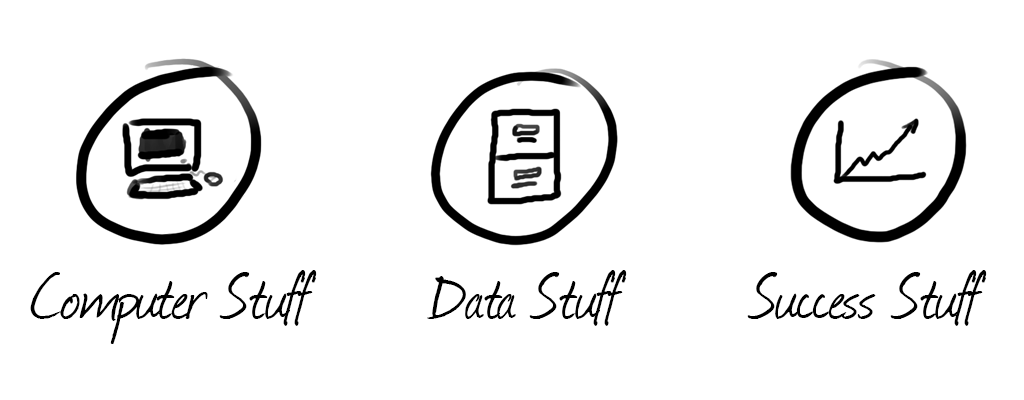
<style>
.page{position:relative;width:1024px;height:400px;background:#ffffff}
.page>*{position:absolute;margin:0}
.t1{font:75px "Journal";color:#000000}
</style>
<div class="page">
<p class="t1" style="left:30px;top:270px;width:287px;height:74px">Computer Stuff</p>
<p class="t1" style="left:427px;top:270px;width:200px;height:56px">Data Stuff</p>
<p class="t1" style="left:747px;top:270px;width:240px;height:56px">Success Stuff</p>
</div>
